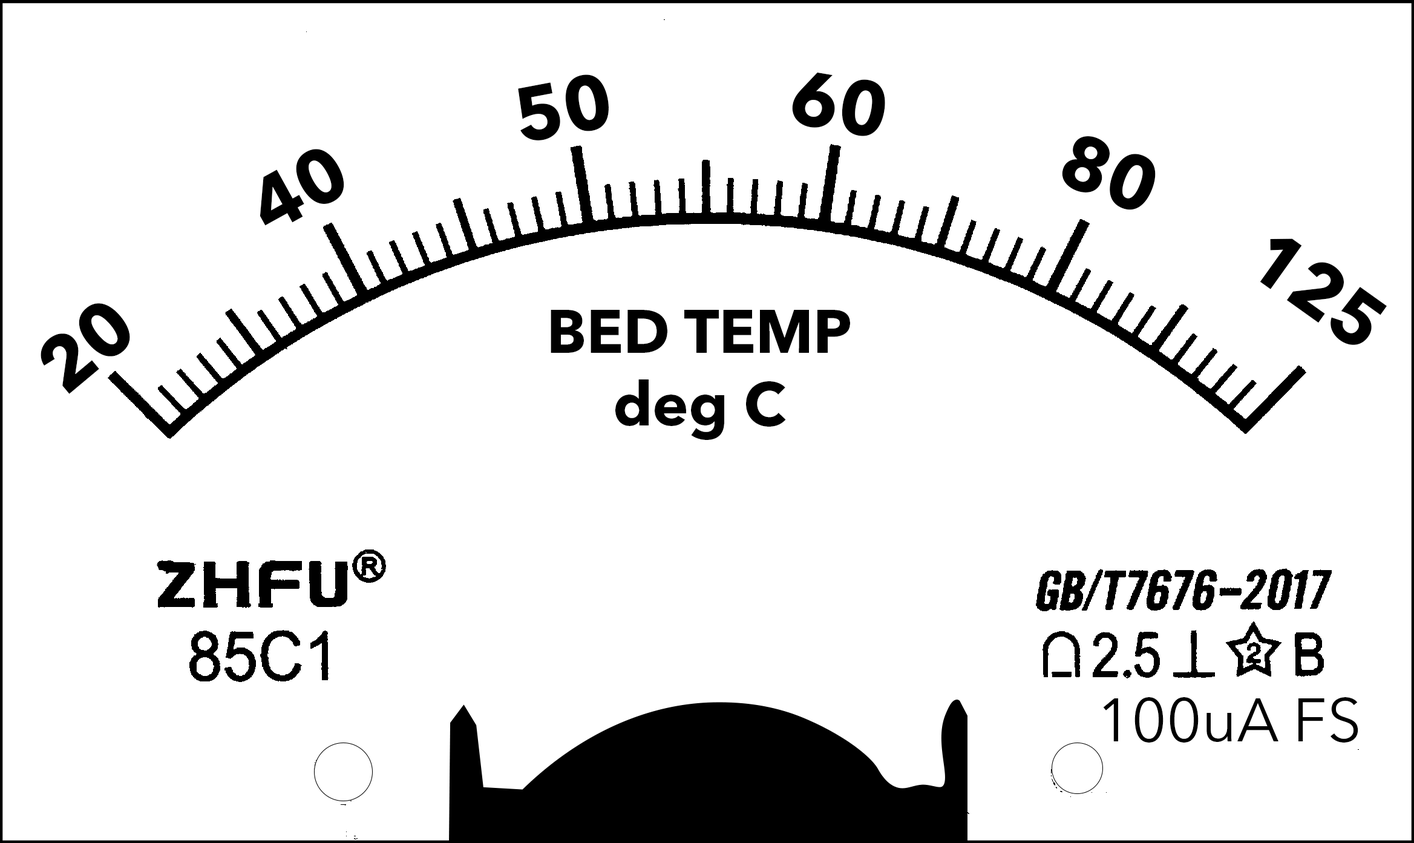
<style>
.page{position:relative;width:1414px;height:843px;background:#ffffff}
.page>*{position:absolute;margin:0}
.t1{font:75.7px "AvenirNextLTPro-Bold";color:#000000}
.t2{font:60.5px "AvenirNextLTPro-Bold";color:#000000}
.t3{font:60.5px "AvenirNextLTPro-Regular";color:#000000}
</style>
<div class="page">
<p class="t1" style="left:518px;top:74px;width:91px;height:66px;rotate:-11deg">50</p>
<p class="t1" style="left:792px;top:72px;width:93px;height:64px;rotate:10deg">60</p>
<p class="t1" style="left:1062px;top:136px;width:94px;height:74px;rotate:21deg">80</p>
<p class="t1" style="left:260px;top:149px;width:84px;height:77px;rotate:-29deg">40</p>
<p class="t1" style="left:1260px;top:238px;width:127px;height:107px;rotate:36deg">125</p>
<p class="t1" style="left:41px;top:303px;width:89px;height:91px;rotate:-40deg">20</p>
<p class="t2" style="left:551px;top:310px;width:299px;height:130px;text-align:center">BED TEMP<br>deg C</p>
<p class="t3" style="left:1103px;top:697px;width:256px;height:46px">100uA FS</p>
</div>
